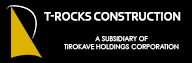
<style>
.page{position:relative;width:192px;height:63px;background:#000000}
.page>*{position:absolute;margin:0}
.t1{font:11.6px "Corbel";color:#ffffff;text-transform:uppercase;font-weight:bold}
.t2{font:6.6px "CenturyGothic";color:#ffffff;text-transform:uppercase}
</style>
<div class="page">
<p class="t1" style="left:44px;top:12px;width:137px;height:9px">T-Rocks Construction</p>
<p class="t2" style="left:64px;top:36px;width:115px;height:14px;text-align:center">a subsidiary of<br>tirokave holdings corporation</p>
</div>
